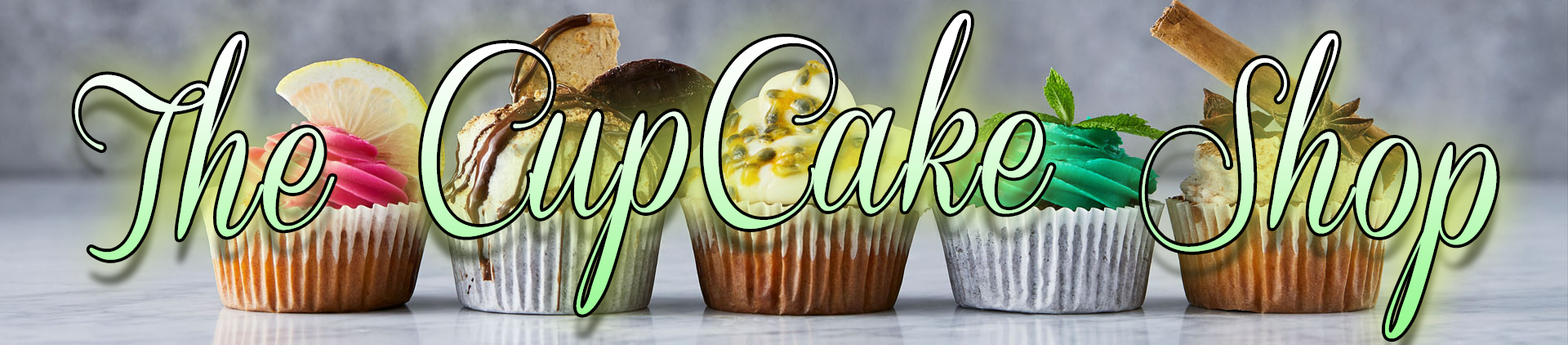
<style>
.page{position:relative;width:1568px;height:345px}
.page>*{position:absolute;margin:0}
.t1{font:190.9px/213.9px "ConeriaScriptDemo";letter-spacing:0.025em;scale:0.85 1}
</style>
<div class="page">
<p class="t1" style="left:74px;top:13px;width:1423px;height:325px;text-align:center">The CupCake Shop</p>
</div>
